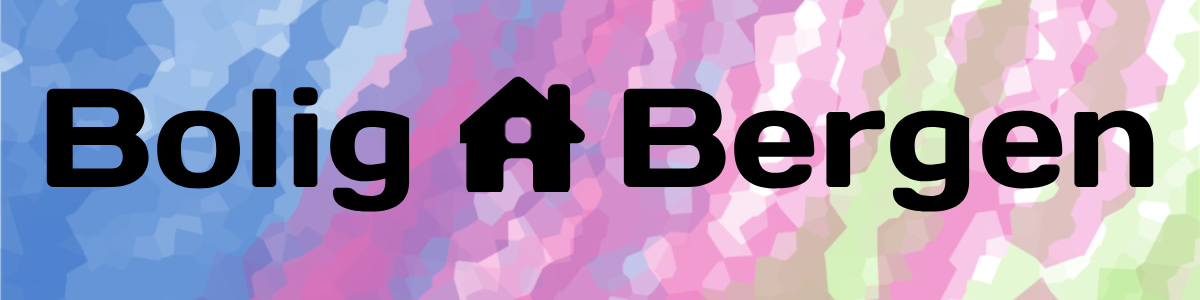
<style>
.page{position:relative;width:1200px;height:300px}
.page>*{position:absolute;margin:0}
.t1{font:140.4px "Days";color:#000000}
</style>
<div class="page">
<p class="t1" style="left:46px;top:87px;width:1108px;height:125px">Bolig    Bergen</p>
</div>
